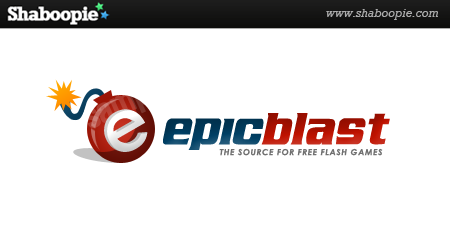
<style>
.page{position:relative;width:450px;height:250px;background:#ffffff}
.page>*{position:absolute;margin:0}
.t1{font:75px "CenturyGothic-Bold"}
.t2{font:75px "AirMillhouseItalic";color:#bf1200}
.t3{font:75px "AirMillhouseItalic";color:#004065}
.t4{font:8.3px "CenturyGothic-BoldItalic";letter-spacing:0.075em;color:#707070}
</style>
<div class="page">
<p class="t1" style="left:104px;top:109px;width:44px;height:43px;rotate:-30deg">e</p>
<p class="t2" style="left:163px;top:113px;width:227px;height:37px"><span class="t3">epic</span>blast</p>
<p class="t4" style="left:219px;top:148px;width:164px;height:8px">THE SOURCE FOR FREE FLASH GAMES</p>
</div>
